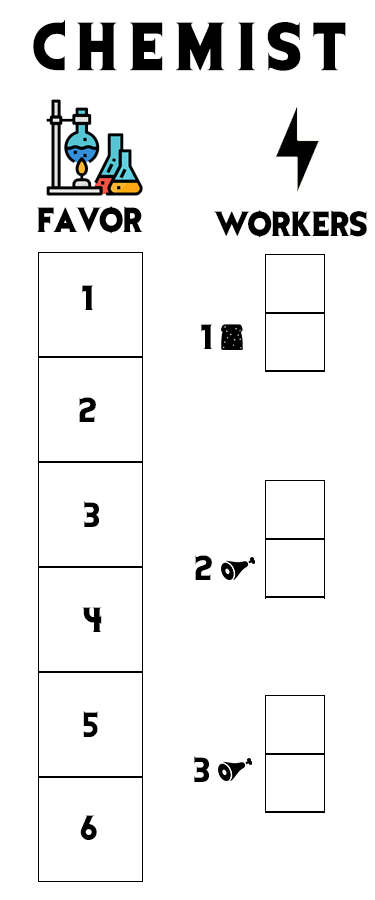
<style>
.page{position:relative;width:375px;height:900px;background:#ffffff}
.page>*{position:absolute;margin:0}
.t1{font:56.2px "EvilDead";letter-spacing:0.2em;color:#000000}
.t2{font:29.2px "EvilDead";color:#000000}
</style>
<div class="page">
<p class="t1" style="left:33px;top:20px;width:313px;height:51px">CHEMIST</p>
<p class="t2" style="left:37px;top:206px;width:106px;height:28px">FAVOR</p>
<p class="t2" style="left:213px;top:210px;width:154px;height:28px">WORKERS</p>
<p class="t2" style="left:82px;top:285px;width:12px;height:25px">1</p>
<p class="t2" style="left:201px;top:324px;width:12px;height:25px">1</p>
<p class="t2" style="left:79px;top:397px;width:17px;height:25px">2</p>
<p class="t2" style="left:84px;top:501px;width:15px;height:26px">3</p>
<p class="t2" style="left:195px;top:555px;width:17px;height:25px">2</p>
<p class="t2" style="left:82px;top:607px;width:20px;height:25px">4</p>
<p class="t2" style="left:83px;top:711px;width:15px;height:26px">5</p>
<p class="t2" style="left:194px;top:756px;width:15px;height:26px">3</p>
<p class="t2" style="left:80px;top:815px;width:17px;height:25px">6</p>
</div>
